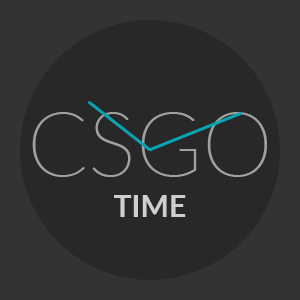
<style>
.page{position:relative;width:300px;height:300px;background:#282828}
.page>*{position:absolute;margin:0}
.t1{font:90px "Lato-Thin";color:#a1a1a1}
.t2{font:30px "Lato-Bold";color:#cfcfcf}
</style>
<div class="page">
<p class="t1" style="left:32px;top:112px;width:235px;height:65px">CSGO</p>
<p class="t2" style="left:114px;top:195px;width:72px;height:22px">TIME</p>
</div>
